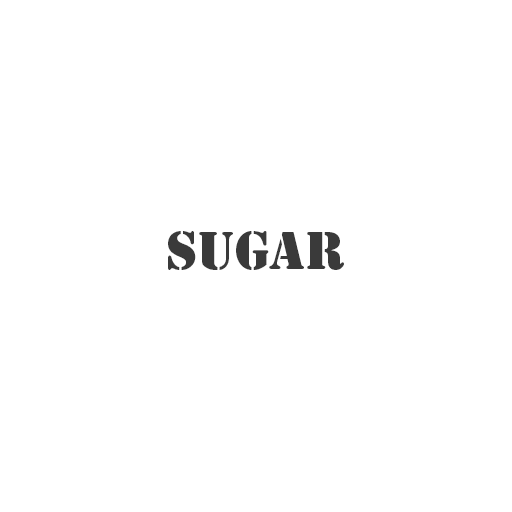
<style>
.page{position:relative;width:512px;height:512px;background:#ffffff}
.page>*{position:absolute;margin:0}
.t1{font:50px "StencilStd";color:#3a3a3a}
</style>
<div class="page">
<p class="t1" style="left:168px;top:231px;width:176px;height:39px">Sugar</p>
</div>
